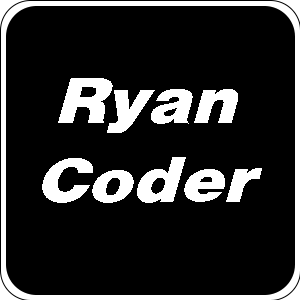
<style>
.page{position:relative;width:300px;height:300px;background:#000000}
.page>*{position:absolute;margin:0}
.t1{font:68.1px/79.4px "HelveticaObl-Heavy";color:#ffffff;scale:1.1 1}
</style>
<div class="page">
<p class="t1" style="left:42px;top:78px;width:220px;height:125px;text-align:center">Ryan<br>Coder</p>
</div>
